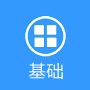
<style>
.page{position:relative;width:90px;height:90px;background:#3399ff}
.page>*{position:absolute;margin:0}
.t1{font:16.9px "MicrosoftYaHei";letter-spacing:0.05em;color:#ffffff}
</style>
<div class="page">
<p class="t1" style="left:29px;top:62px;width:34px;height:17px">基础</p>
</div>
